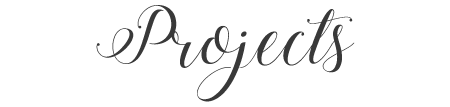
<style>
.page{position:relative;width:450px;height:107px;background:#ffffff}
.page>*{position:absolute;margin:0}
.t1{font:72px "StylishCalligraphyDemo";color:#393939}
</style>
<div class="page">
<p class="t1" style="left:96px;top:5px;width:259px;height:97px">Projects</p>
</div>
